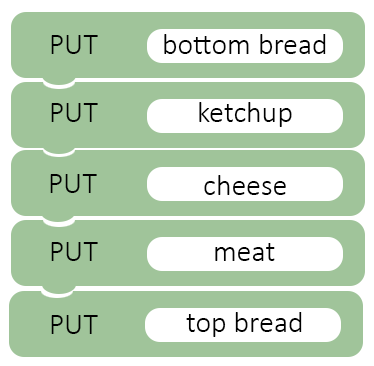
<style>
.page{position:relative;width:374px;height:366px;background:#a0c49a}
.page>*{position:absolute;margin:0}
.t1{font:30px "Calibri-Light";color:#000000}
</style>
<div class="page">
<p class="t1" style="left:51px;top:35px;width:47px;height:19px">PUT</p>
<p class="t1" style="left:164px;top:34px;width:162px;height:20px">bottom bread</p>
<p class="t1" style="left:199px;top:102px;width:93px;height:25px">ketchup</p>
<p class="t1" style="left:51px;top:103px;width:47px;height:19px">PUT</p>
<p class="t1" style="left:50px;top:174px;width:47px;height:19px">PUT</p>
<p class="t1" style="left:204px;top:175px;width:82px;height:20px">cheese</p>
<p class="t1" style="left:51px;top:242px;width:47px;height:19px">PUT</p>
<p class="t1" style="left:215px;top:243px;width:60px;height:18px">meat</p>
<p class="t1" style="left:51px;top:315px;width:47px;height:19px">PUT</p>
<p class="t1" style="left:186px;top:312px;width:116px;height:25px">top bread</p>
</div>
